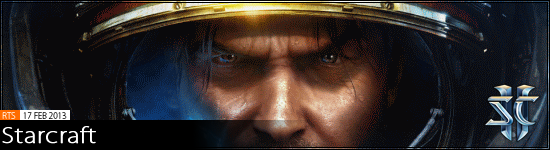
<style>
.page{position:relative;width:550px;height:150px}
.page>*{position:absolute;margin:0}
.t1{font:8.3px "KozGoPro-ExtraLight"}
.t2{font:20.8px "KozGoPro-ExtraLight";color:#ffffff;font-weight:bold;scale:1.2 1}
</style>
<div class="page">
<p class="t1" style="left:2px;top:112px;width:14px;height:7px">RTS</p>
<p class="t1" style="left:23px;top:112px;width:44px;height:7px">17 FEB 2013</p>
<p class="t2" style="left:2px;top:126px;width:94px;height:18px">Starcraft</p>
</div>
